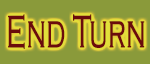
<style>
.page{position:relative;width:150px;height:64px;background:#8a9a3a}
.page>*{position:absolute;margin:0}
.t1{font:47.1px "CopperplateGothic-Light";letter-spacing:-0.01em;color:#6a0c0c;font-weight:bold;scale:0.59 1}
</style>
<div class="page">
<p class="t1" style="left:8px;top:14px;width:137px;height:35px">End Turn</p>
</div>
